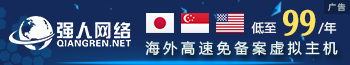
<style>
.page{position:relative;width:350px;height:65px}
.page>*{position:absolute;margin:0}
.t1{font:8px "MicrosoftYaHei";letter-spacing:0.2em}
.t2{font:33.8px "GJJSZJW--GB1-0";color:#ffe25d;font-weight:bold;scale:0.77 1}
.t3{font:12px "MicrosoftYaHei";letter-spacing:0.05em;color:#ffffff}
.t4{font:14px "MicrosoftYaHei";letter-spacing:0.27em;color:#eefff9}
</style>
<div class="page">
<p class="t1" style="left:328px;top:3px;width:18px;height:9px">广告</p>
<p class="t2" style="left:283px;top:9px;width:33px;height:27px">99</p>
<p class="t3" style="left:251px;top:21px;width:86px;height:13px">低至          /年</p>
<p class="t4" style="left:145px;top:41px;width:193px;height:15px">海外高速免备案虚拟主机</p>
</div>
